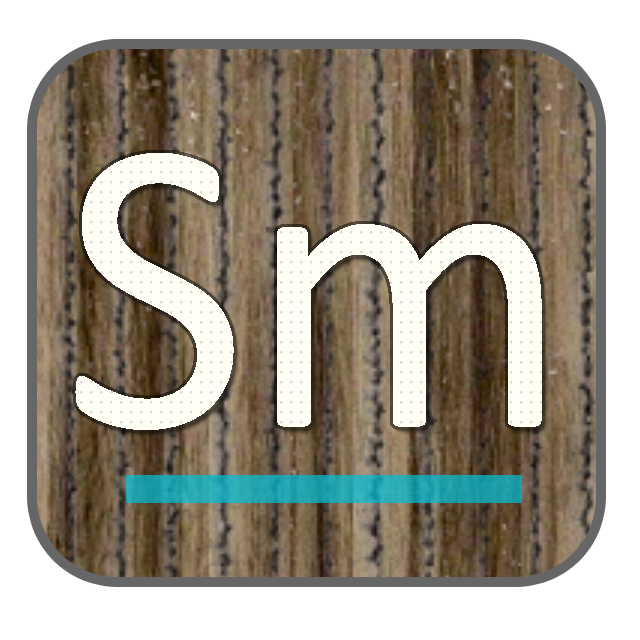
<style>
.page{position:relative;width:640px;height:640px;background:#ffffff}
.page>*{position:absolute;margin:0}
.t1{font:425.1px "Calibri";color:#ffffff;scale:0.95 1}
</style>
<div class="page">
<p class="t1" style="left:75px;top:153px;width:467px;height:277px">Sm</p>
</div>
